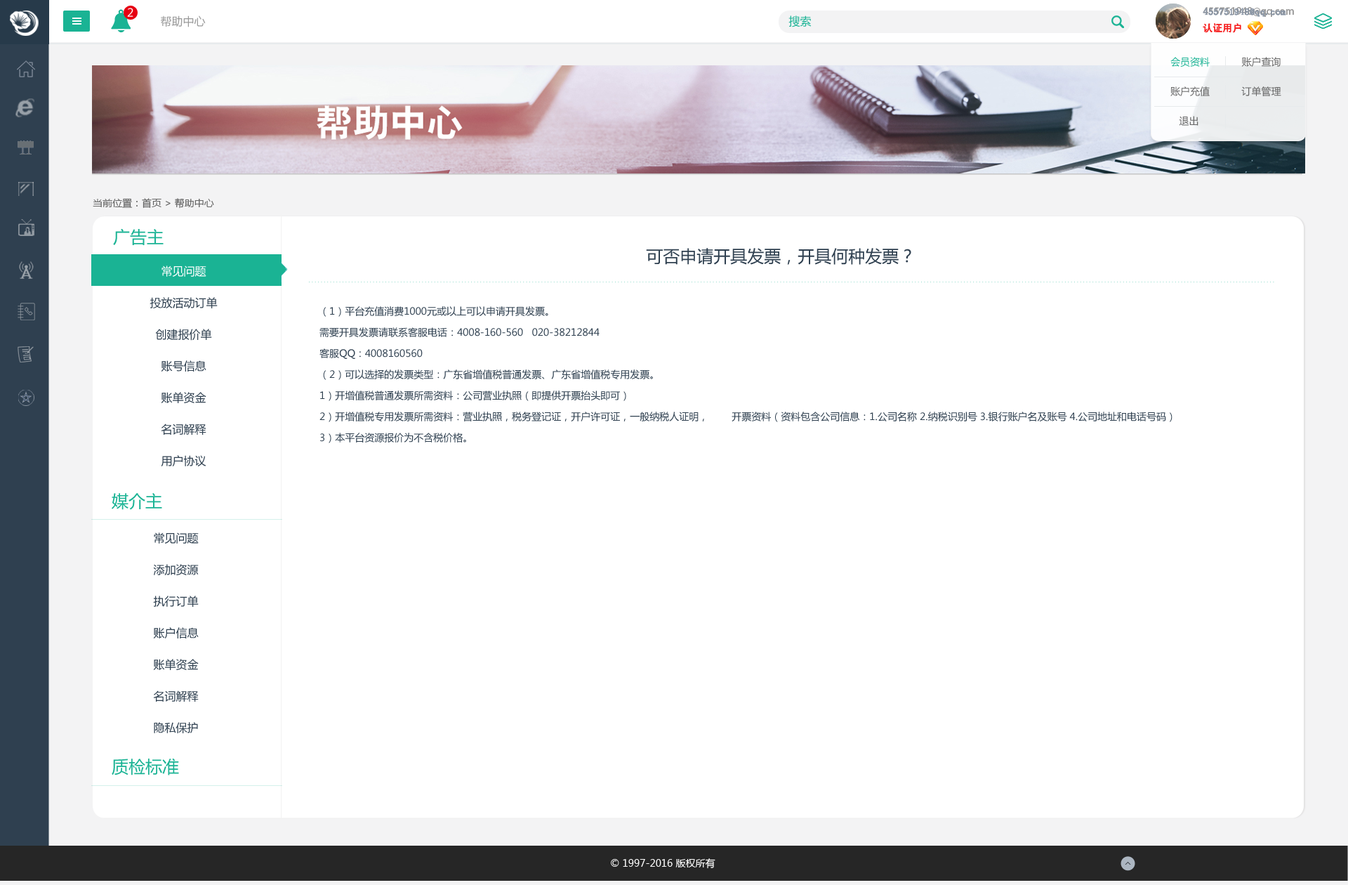
<style>
.page{position:relative;width:1348px;height:885px;background:#ffffff}
.page>*{position:absolute;margin:0}
.t1{font:11.2px "MicrosoftYaHei";color:#ffffff}
.t2{font:11.2px "MicrosoftYaHei";color:#999999}
.t3{font:11.2px "MicrosoftYaHei";color:#1ab394}
.t4{font:9.8px/16.8px "AdobeHeitiStd-Regular";color:#999999}
.t5{font:9.8px/16.8px "AdobeHeitiStd-Regular";color:#f61e1e}
.t6{font:9.8px/16.8px "AdobeHeitiStd-Regular";color:#ffffff}
.t7{font:9.8px/16.8px "SimSun";color:#8894a4;font-weight:bold}
.t8{font:9.8px/16.8px "SimSun";color:#f61e1e}
.t9{font:9.8px/29.5px "MicrosoftYaHei";color:#666666}
.t10{font:9.8px/29.5px "MicrosoftYaHei";color:#1ab394}
.t11{font:9.8px "MicrosoftYaHei";color:#666666}
.t12{font:16.8px "MicrosoftYaHei";color:#1ab394}
.t13{font:16.8px "MicrosoftYaHei";color:#2f4050}
.t14{font:11.2px/31.6px "MicrosoftYaHei";color:#2f4050}
.t15{font:11.2px/31.6px "MicrosoftYaHei";color:#ffffff}
.t16{font:9.8px/21.1px "MicrosoftYaHei";color:#2f4050}
.t17{font:9.8px "MicrosoftYaHei";color:#ffffff}
</style>
<div class="page">
<p class="t1" style="left:127px;top:8px;width:6px;height:9px">2</p>
<p class="t2" style="left:161px;top:15px;width:45px;height:12px">帮助中心</p>
<p class="t3" style="left:788px;top:15px;width:24px;height:12px">搜索</p>
<p class="t4" style="left:1203px;top:7px;width:91px;height:26px">455751948@qq.com<br><span class="t5">认证用户               </span><span class="t6">退出</span></p>
<p class="t7" style="left:1203px;top:8px;width:83px;height:25px">455751948@qq.com<br><span class="t8">认证用户</span></p>
<p class="t9" style="left:1170px;top:57px;width:111px;height:69px"><span class="t10">会员资料</span>           账户查询<br>账户充值           订单管理           <br>   退出</p>
<p class="t11" style="left:93px;top:198px;width:121px;height:11px">当前位置：首页 &gt; 帮助中心</p>
<p class="t12" style="left:113px;top:228px;width:51px;height:17px">广告主</p>
<p class="t13" style="left:646px;top:248px;width:265px;height:17px">可否申请开具发票，开具何种发票？</p>
<p class="t14" style="left:150px;top:265px;width:68px;height:201px;text-align:center"><span class="t15">常见问题<br></span>投放活动订单<br>创建报价单<br>账号信息<br>账单资金<br>名词解释<br>用户协议<br>内容审核标准</p>
<p class="t16" style="left:319px;top:306px;width:853px;height:137px">（1）平台充值消费1000元或以上可以申请开具发票。<br>需要开具发票请联系客服电话：4008-160-560   020-38212844<br>客服QQ：4008160560<br>（2）可以选择的发票类型：广东省增值税普通发票、广东省增值税专用发票。<br>1）开增值税普通发票所需资料：公司营业执照（即提供开票抬头即可）<br>2）开增值税专用发票所需资料：营业执照，税务登记证，开户许可证，一般纳税人证明，        开票资料（资料包含公司信息：1.公司名称 2.纳税识别号 3.银行账户名及账号 4.公司地址和电话号码）<br>3）本平台资源报价为不含税价格。</p>
<p class="t12" style="left:112px;top:493px;width:50px;height:17px">媒介主</p>
<p class="t14" style="left:153px;top:532px;width:46px;height:201px">常见问题<br>添加资源<br>执行订单<br>账户信息<br>账单资金<br>名词解释<br>隐私保护<br>用户协议</p>
<p class="t12" style="left:112px;top:758px;width:67px;height:17px">质检标准</p>
<p class="t17" style="left:611px;top:858px;width:104px;height:10px">© 1997-2016 版权所有</p>
</div>
